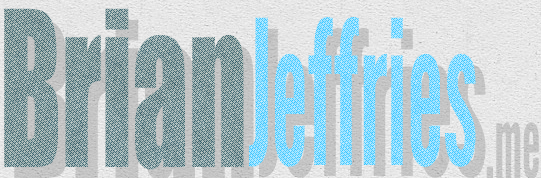
<style>
.page{position:relative;width:541px;height:178px}
.page>*{position:absolute;margin:0}
.t1{font:200px "Impact";scale:0.56 1}
.t2{font:200px "LeagueGothic";scale:0.56 1}
.t3{font:100px "LeagueGothic";color:#c5c5c5;scale:0.56 1}
</style>
<div class="page">
<p class="t1" style="left:4px;top:8px;width:240px;height:162px">Brian</p>
<p class="t2" style="left:249px;top:17px;width:227px;height:150px">Jeffries</p>
<p class="t3" style="left:486px;top:122px;width:53px;height:56px">.me</p>
</div>
